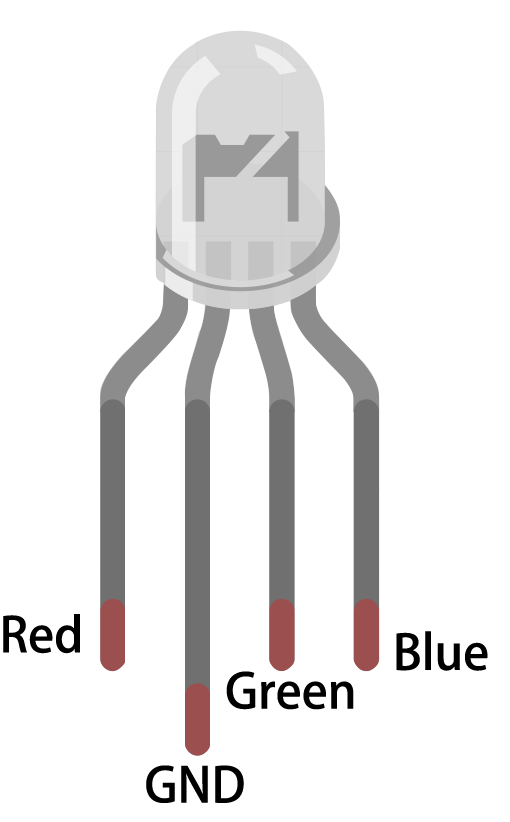
<style>
.page{position:relative;width:510px;height:822px;background:#ffffff}
.page>*{position:absolute;margin:0}
.t1{font:48px "AdobeHeitiStd-Regular";color:#000000}
</style>
<div class="page">
<p class="t1" style="left:3px;top:614px;width:77px;height:40px">Red</p>
<p class="t1" style="left:396px;top:631px;width:92px;height:40px">Blue</p>
<p class="t1" style="left:226px;top:671px;width:128px;height:39px">Green</p>
<p class="t1" style="left:146px;top:765px;width:98px;height:38px">GND</p>
</div>
